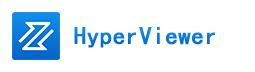
<style>
.page{position:relative;width:255px;height:72px;background:#ffffff}
.page>*{position:absolute;margin:0}
.t1{font:24.9px "SimHei";color:#0a79d8;font-weight:bold}
</style>
<div class="page">
<p class="t1" style="left:74px;top:27px;width:141px;height:21px">HyperViewer</p>
</div>
